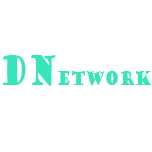
<style>
.page{position:relative;width:152px;height:152px;background:#ffffff}
.page>*{position:absolute;margin:0}
.t1{font:18px "GoudyStout";color:#37e5ba;scale:0.63 1}
.t2{font:39.4px "GoudyStout";color:#37e5ba;scale:0.63 1}
</style>
<div class="page">
<p class="t1" style="left:3px;top:55px;width:148px;height:31px"><span class="t2">DN</span>ETwork</p>
</div>
